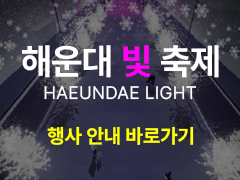
<style>
.page{position:relative;width:240px;height:180px}
.page>*{position:absolute;margin:0}
.t1{font:36px "PretendardVariable-Bold";letter-spacing:-0.01em;color:#ffffff}
.t2{font:36px "PretendardVariable-Bold";letter-spacing:-0.01em;color:#ff01f9}
.t3{font:18px "PretendardVariable-Regular";letter-spacing:0.02em;color:#ffffff}
.t4{font:20px "PretendardVariable-Bold";color:#ffff00}
</style>
<div class="page">
<p class="t1" style="left:22px;top:45px;width:197px;height:33px">해운대 <span class="t2">빛</span> 축제</p>
<p class="t3" style="left:44px;top:86px;width:152px;height:14px">HAEUNDAE LIGHT</p>
<p class="t4" style="left:47px;top:126px;width:147px;height:19px">행사 안내 바로가기</p>
</div>
